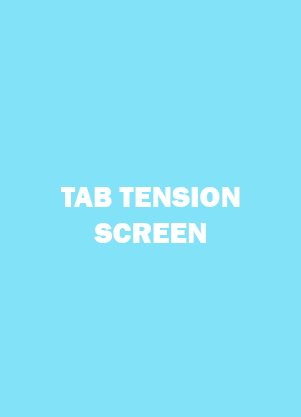
<style>
.page{position:relative;width:301px;height:417px;background:#82e3f8}
.page>*{position:absolute;margin:0}
.t1{font:30px "FranklinGothic-Heavy";color:#ffffff}
</style>
<div class="page">
<p class="t1" style="left:61px;top:187px;width:179px;height:56px;text-align:center">TAB TENSION SCREEN</p>
</div>
